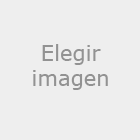
<style>
.page{position:relative;width:140px;height:140px;background:#eeeeee}
.page>*{position:absolute;margin:0}
.t1{font:21.1px "Verdana";color:#929292}
</style>
<div class="page">
<p class="t1" style="left:33px;top:44px;width:75px;height:46px;text-align:center">Elegir<br>imagen</p>
</div>
